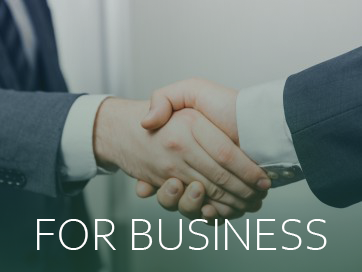
<style>
.page{position:relative;width:362px;height:272px}
.page>*{position:absolute;margin:0}
.t1{font:48px "CorbelLight";color:#ffffff}
</style>
<div class="page">
<p class="t1" style="left:37px;top:219px;width:290px;height:31px">FOR BUSINESS</p>
</div>
